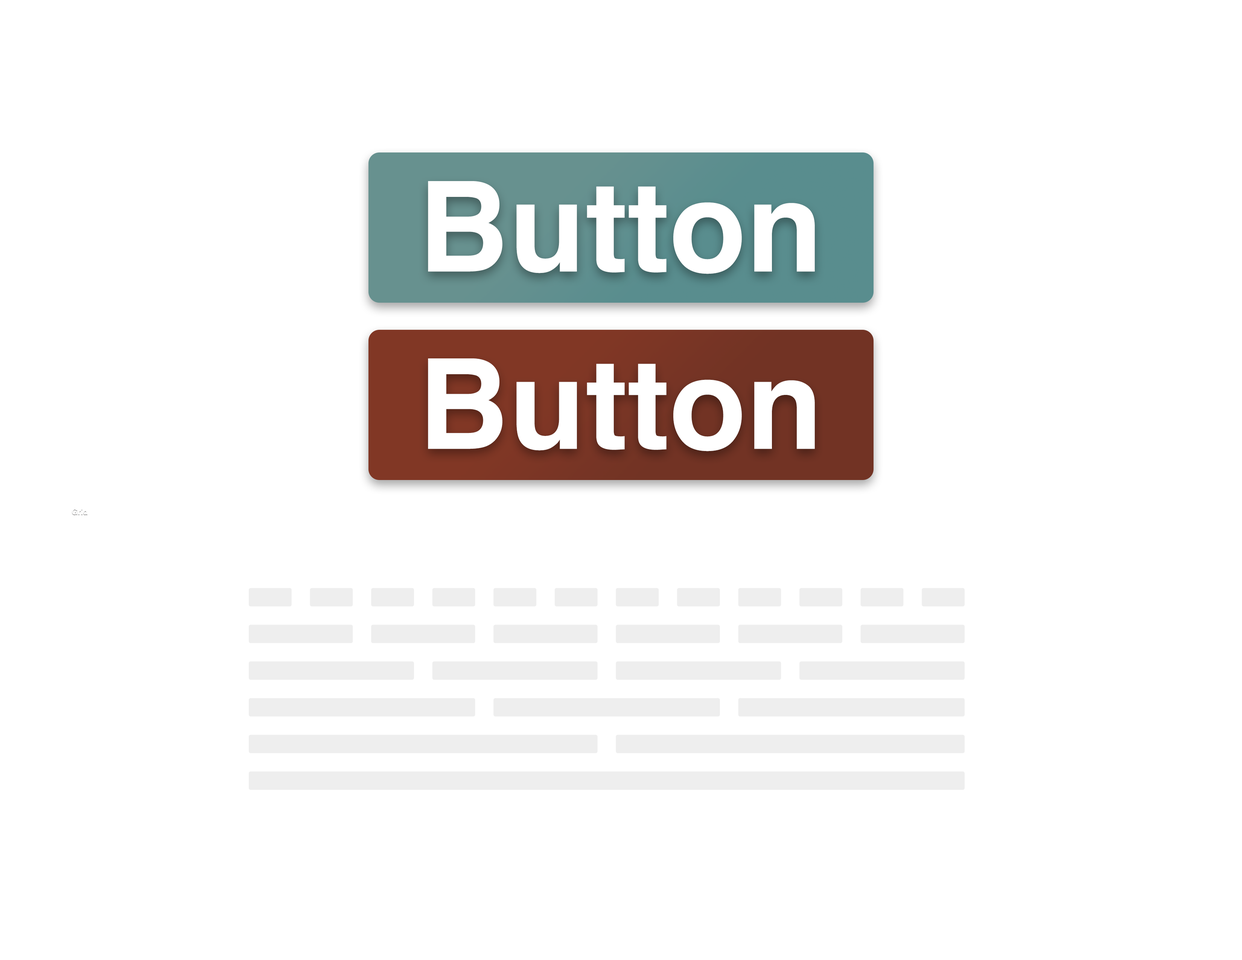
<style>
.page{position:relative;width:1242px;height:960px;background:#ffffff}
.page>*{position:absolute;margin:0}
.t1{font:125.5px "Helvetica-Bold";color:#ffffff}
</style>
<div class="page">
<p class="t1" style="left:428px;top:181px;width:387px;height:93px">Button</p>
<p class="t1" style="left:428px;top:358px;width:387px;height:93px">Button</p>
</div>
